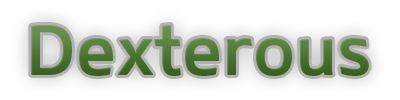
<style>
.page{position:relative;width:400px;height:100px;background:#ffffff}
.page>*{position:absolute;margin:0}
.t1{font:72px "Mentone-SemiBold";color:#477725}
</style>
<div class="page">
<p class="t1" style="left:31px;top:25px;width:338px;height:51px">Dexterous</p>
</div>
